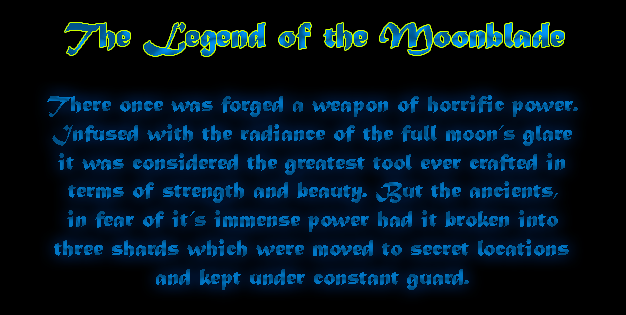
<style>
.page{position:relative;width:626px;height:315px;background:#000000}
.page>*{position:absolute;margin:0}
.t1{font:36px "MaturaMTScriptCapitals"}
.t2{font:24px "MaturaMTScriptCapitals"}
</style>
<div class="page">
<p class="t1" style="left:65px;top:23px;width:499px;height:33px">The Legend of the Moonblade</p>
<p class="t2" style="left:47px;top:95px;width:531px;height:195px;text-align:center">There once was forged a weapon of horrific power.<br>Infused with the radiance of the full moon’s glare<br>it was considered the greatest tool ever crafted in<br>terms of strength and beauty. But the ancients,<br>in fear of it’s immense power had it broken into<br>three shards which were moved to secret locations<br>and kept under constant guard.</p>
</div>
